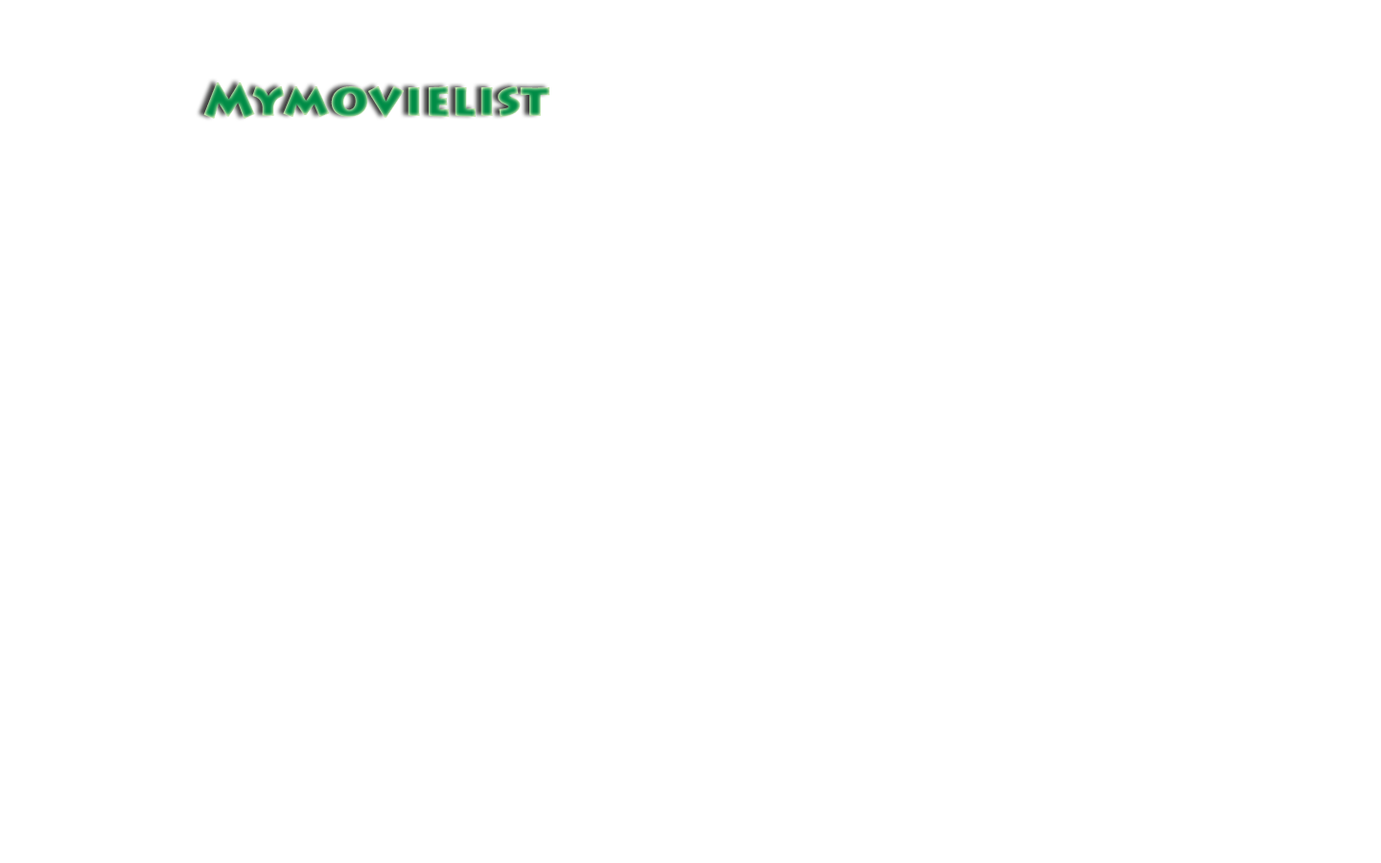
<style>
.page{position:relative;width:1381px;height:863px;background:#ffffff}
.page>*{position:absolute;margin:0}
.t1{font:46px "LithosPro-Black";font-weight:bold}
</style>
<div class="page">
<p class="t1" style="left:203px;top:82px;width:347px;height:37px">Mymovielist</p>
</div>
